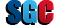
<style>
.page{position:relative;width:58px;height:25px;background:#ffffff}
.page>*{position:absolute;margin:0}
.t1{font:29.3px "Impact"}
</style>
<div class="page">
<p class="t1" style="left:5px;top:2px;width:47px;height:23px">SGC</p>
</div>
